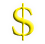
<style>
.page{position:relative;width:45px;height:44px;background:#ffffff}
.page>*{position:absolute;margin:0}
.t1{font:60px "AdobeHebrew-Regular"}
</style>
<div class="page">
<p class="t1" style="left:12px;top:3px;width:22px;height:38px">$</p>
</div>
